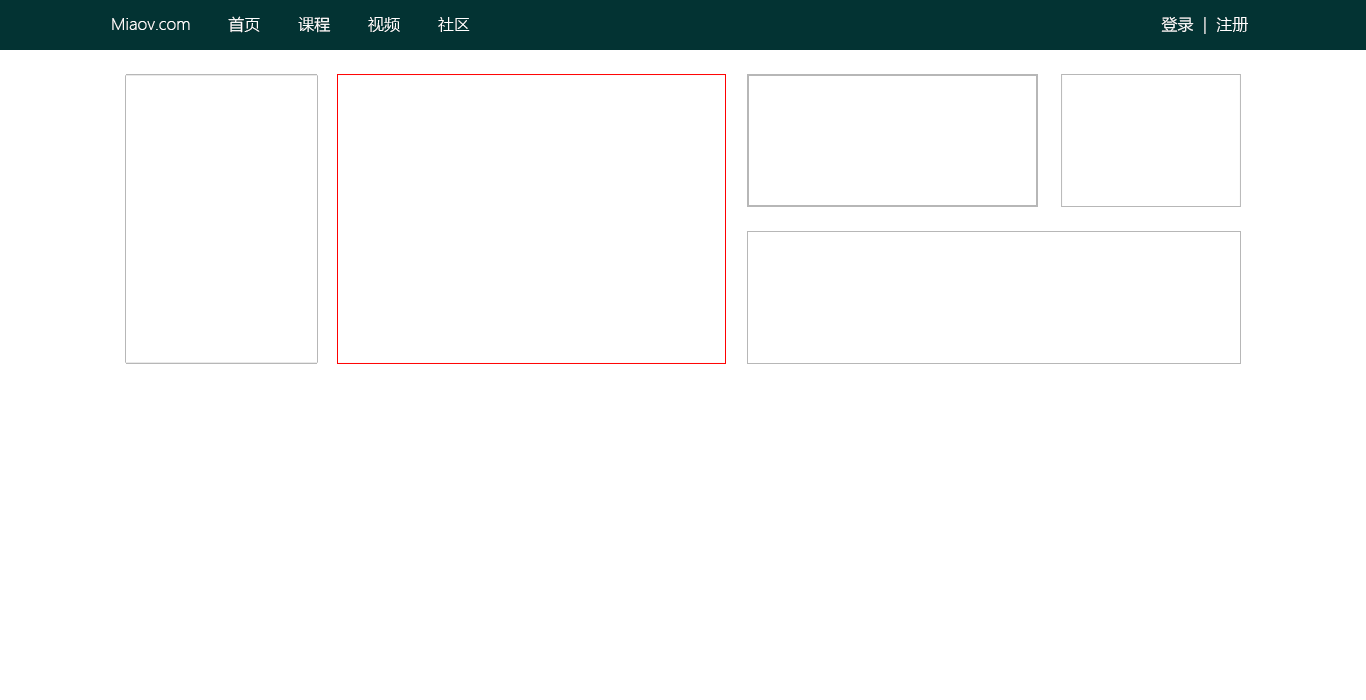
<style>
.page{position:relative;width:1366px;height:700px;background:#ffffff}
.page>*{position:absolute;margin:0}
.t1{font:16px "MicrosoftYaHeiLight";color:#ffffff}
</style>
<div class="page">
<p class="t1" style="left:112px;top:16px;width:358px;height:17px">Miaov.com        首页        课程        视频        社区</p>
<p class="t1" style="left:1161px;top:16px;width:87px;height:18px">登录  |  注册</p>
</div>
